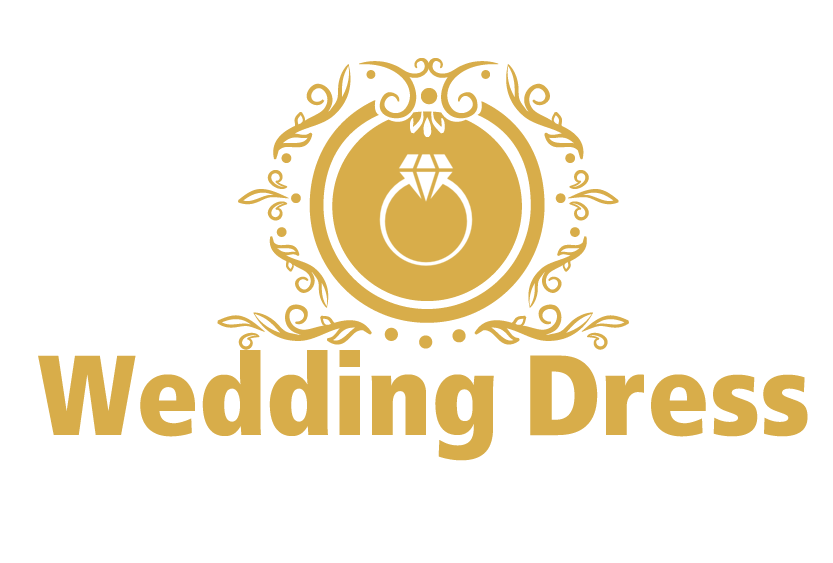
<style>
.page{position:relative;width:833px;height:563px;background:#ffffff}
.page>*{position:absolute;margin:0}
.t1{font:145.8px "Hayah";color:#d8ad4a}
</style>
<div class="page">
<p class="t1" style="left:38px;top:350px;width:770px;height:111px">Wedding Dress</p>
</div>
